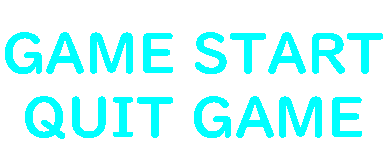
<style>
.page{position:relative;width:384px;height:160px;background:#ffffff}
.page>*{position:absolute;margin:0}
.t1{font:54.8px "UDDigiKyokashoNK-B";color:#00ffff}
</style>
<div class="page">
<p class="t1" style="left:5px;top:32px;width:378px;height:42px">GAME START</p>
<p class="t1" style="left:25px;top:96px;width:337px;height:43px">QUIT GAME</p>
</div>
